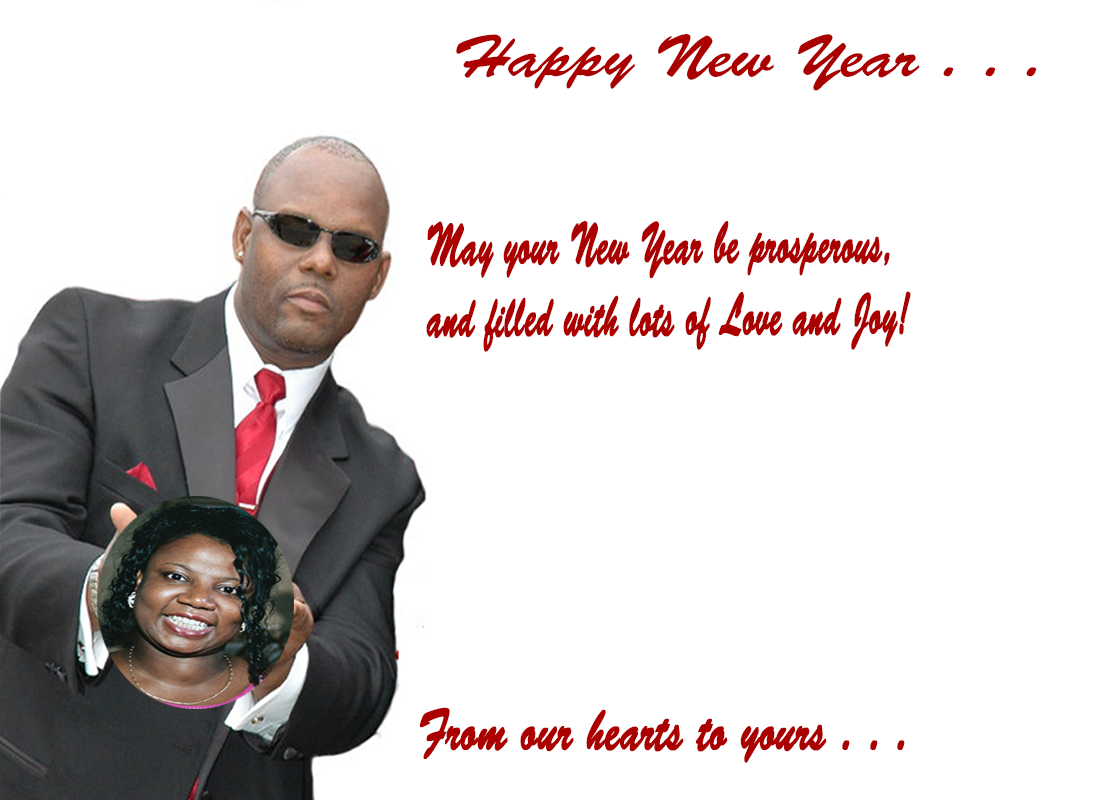
<style>
.page{position:relative;width:1100px;height:800px;background:#ffffff}
.page>*{position:absolute;margin:0}
.t1{font:60px "BrushScriptStd";color:#aa0000;scale:1.08 1}
.t2{font:60px "BrushScriptStd";color:#aa0000;font-weight:bold;scale:0.51 1}
.t3{font:60px "BrushScriptStd";color:#aa0000;font-weight:bold;scale:0.66 1}
</style>
<div class="page">
<p class="t1" style="left:456px;top:34px;width:581px;height:57px">Happy New Year . . . .</p>
<p class="t2" style="left:426px;top:221px;width:485px;height:131px">May your New Year be prosperous,<br>and filled with lots of Love and Joy!</p>
<p class="t3" style="left:419px;top:707px;width:486px;height:56px">From our hearts to yours . . .</p>
</div>
